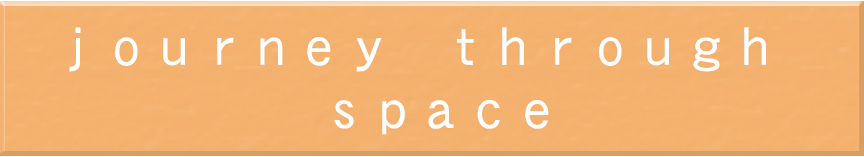
<style>
.page{position:relative;width:864px;height:157px;background:#f4b16e}
.page>*{position:absolute;margin:0}
.t1{font:53.1px "GrisaiaCustom";color:#ffffff;scale:0.91 1}
</style>
<div class="page">
<p class="t1" style="left:69px;top:27px;width:697px;height:108px;text-align:center">ｊｏｕｒｎｅｙ　ｔｈｒｏｕｇｈ<br>　ｓｐａｃｅ</p>
</div>
